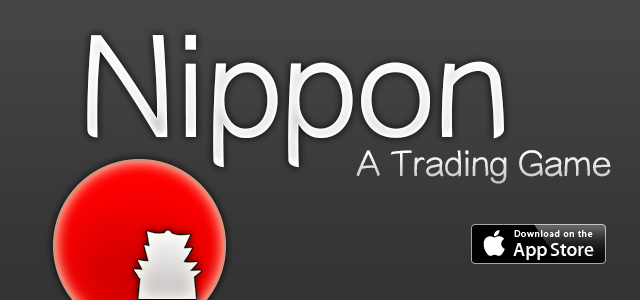
<style>
.page{position:relative;width:640px;height:300px}
.page>*{position:absolute;margin:0}
.t1{font:142.1px "YuppyTC-Regular";color:#f6f6f6}
.t2{font:35.5px "YuppyTC-Regular";color:#e2e2e2}
</style>
<div class="page">
<p class="t1" style="left:87px;top:34px;width:417px;height:134px">Nippon</p>
<p class="t2" style="left:356px;top:150px;width:255px;height:34px">A Trading Game</p>
</div>
